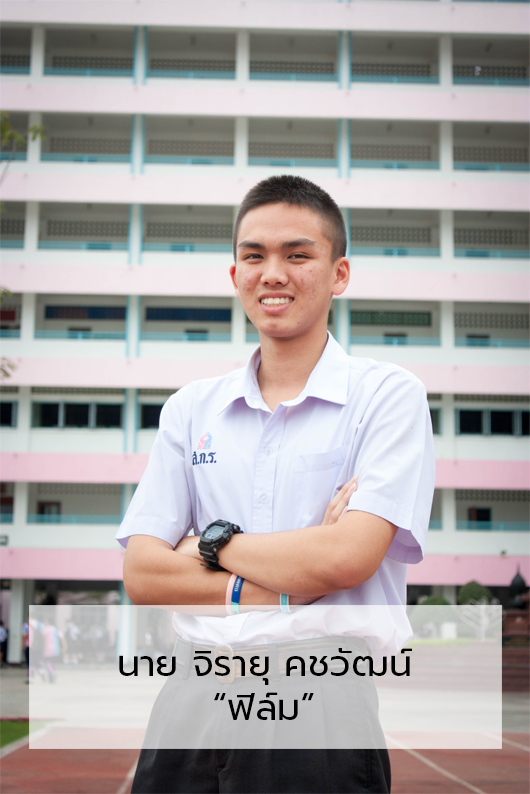
<style>
.page{position:relative;width:530px;height:794px}
.page>*{position:absolute;margin:0}
.t1{font:36.7px "Prompt-Regular";color:#000000}
</style>
<div class="page">
<p class="t1" style="left:119px;top:648px;width:293px;height:72px">นาย จิรายุ คชวัฒน์<br>       “ฟิล์ม”</p>
</div>
